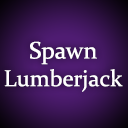
<style>
.page{position:relative;width:128px;height:128px}
.page>*{position:absolute;margin:0}
.t1{font:23px "Constantia";color:#ffffff}
.t2{font:24px "Constantia";color:#ffffff}
</style>
<div class="page">
<p class="t1" style="left:4px;top:41px;width:119px;height:51px;text-align:center"><span class="t2"><br>Spawn <br></span>Lumberjack</p>
</div>
